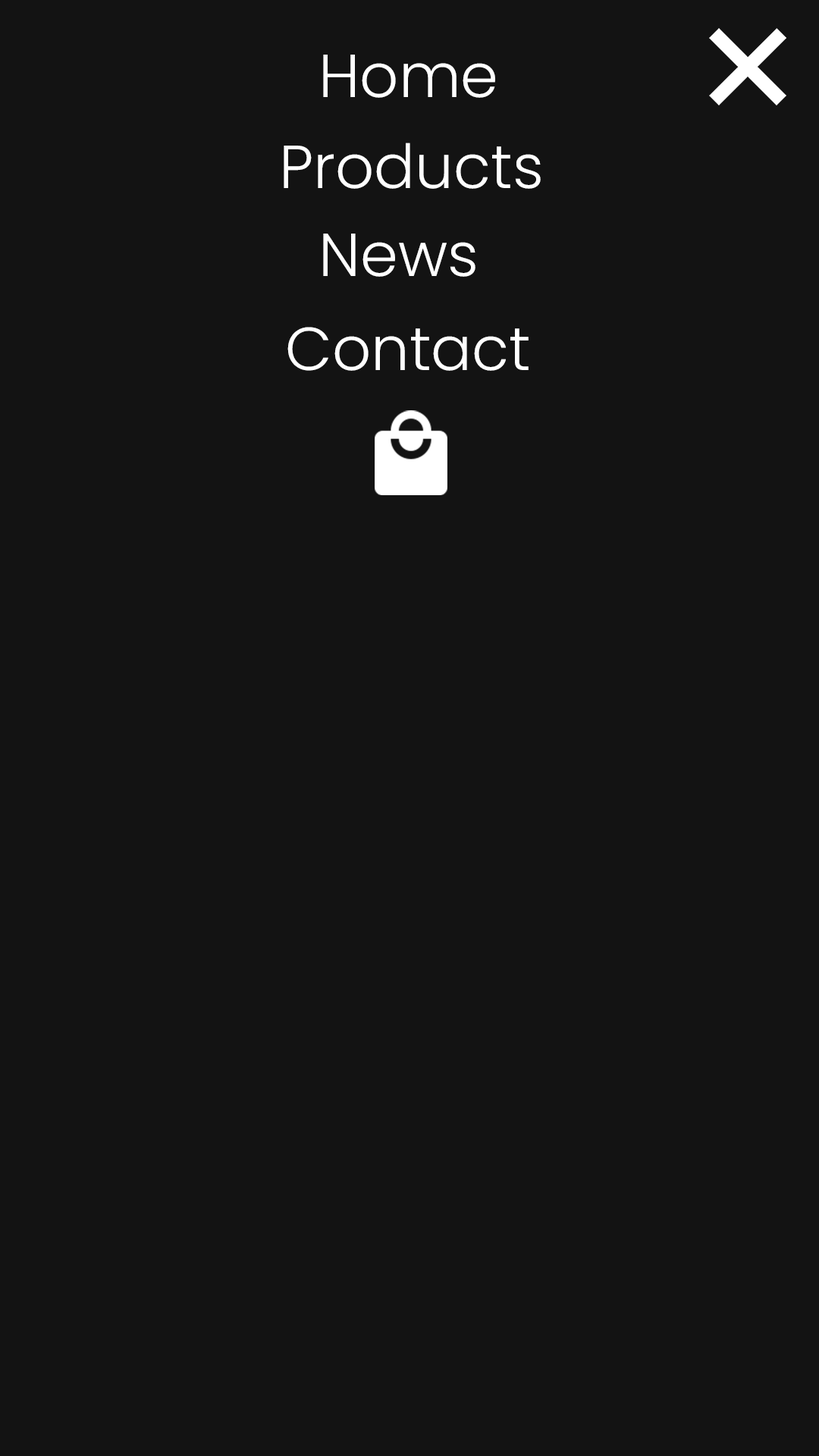
<style>
.page{position:relative;width:819px;height:1456px;background:#131313}
.page>*{position:absolute;margin:0}
.t1{font:60.7px "Poppins-Light";color:#ffffff}
</style>
<div class="page">
<p class="t1" style="left:323px;top:55px;width:172px;height:43px">Home</p>
<p class="t1" style="left:284px;top:143px;width:257px;height:46px">Products</p>
<p class="t1" style="left:323px;top:234px;width:152px;height:43px">News</p>
<p class="t1" style="left:287px;top:327px;width:242px;height:44px">Contact</p>
</div>
